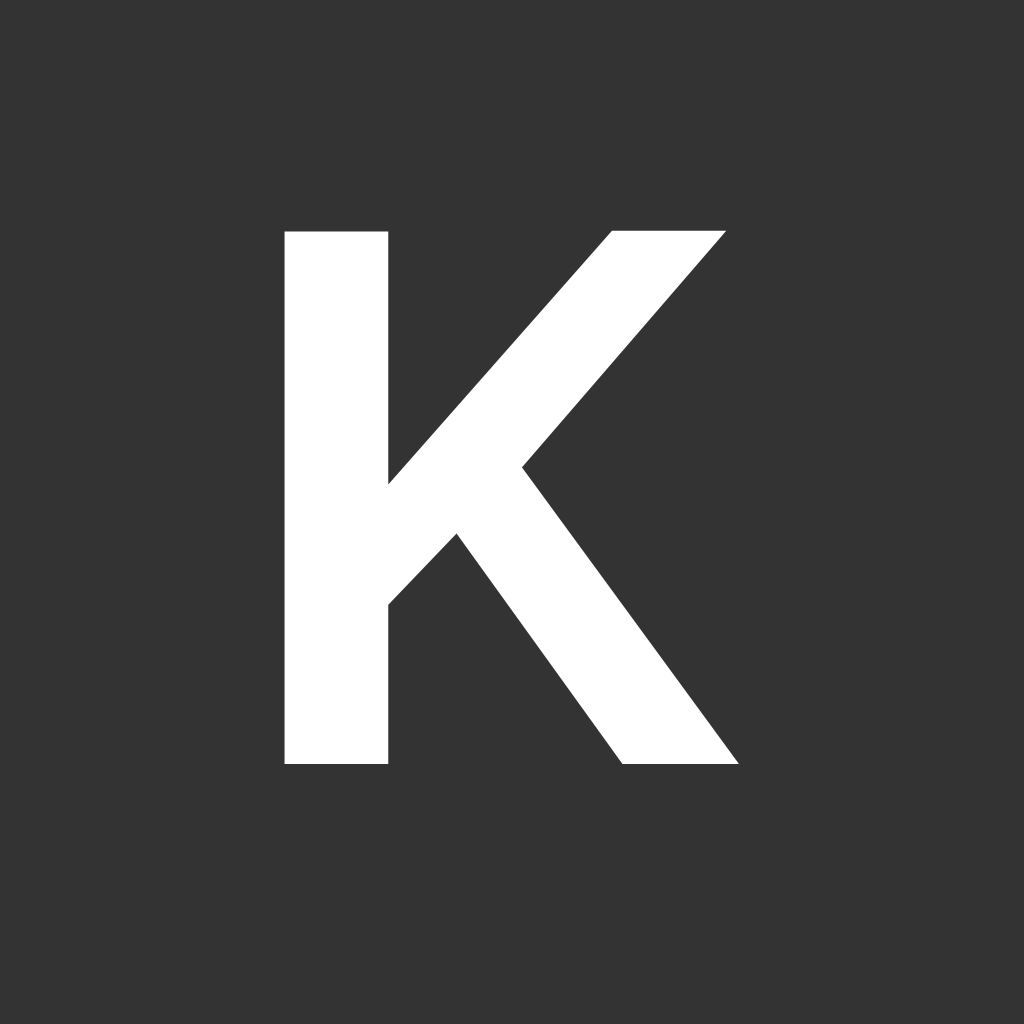
<style>
.page{position:relative;width:1024px;height:1024px;background:#333333}
.page>*{position:absolute;margin:0}
.t1{font:750.8px "Raleway-Bold";letter-spacing:0.004em;color:#ffffff}
</style>
<div class="page">
<p class="t1" style="left:284px;top:230px;width:455px;height:534px">K</p>
</div>
